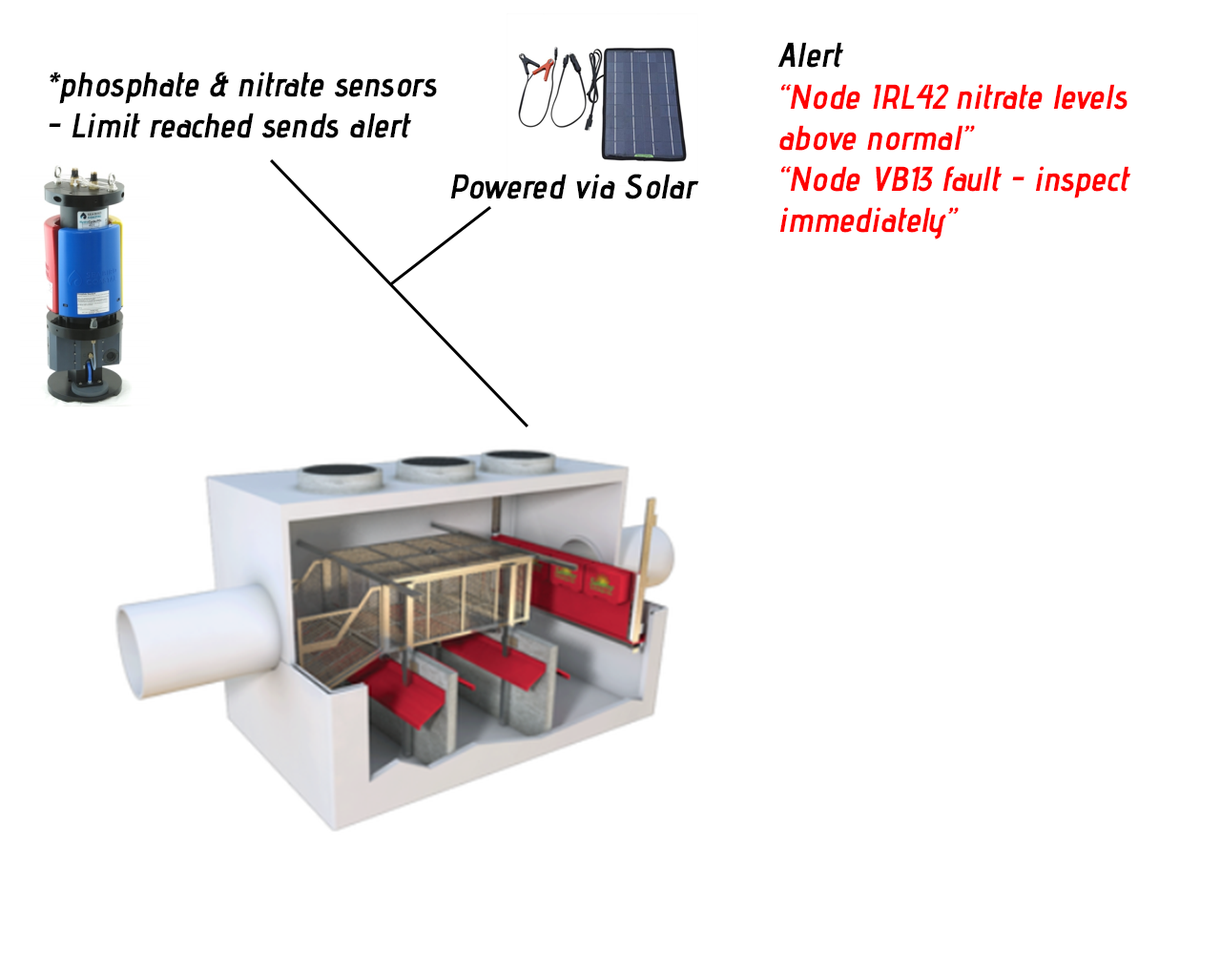
<style>
.page{position:relative;width:1221px;height:977px;background:#ffffff}
.page>*{position:absolute;margin:0}
.t1{font:34.3px "AdventPro-Bold";color:#ff0000;font-style:italic}
.t2{font:34.3px "AdventPro-Bold";color:#000000;font-style:italic}
</style>
<div class="page">
<p class="t1" style="left:777px;top:42px;width:354px;height:197px"><span class="t2">Alert<br></span>“Node IRL42 nitrate levels <br>above normal”<br>“Node VB13 fault - inspect <br>immediately”</p>
<p class="t2" style="left:49px;top:72px;width:388px;height:66px">*phosphate &amp; nitrate sensors<br>- Limit reached sends alert</p>
<p class="t2" style="left:450px;top:174px;width:249px;height:25px">Powered via Solar</p>
</div>
